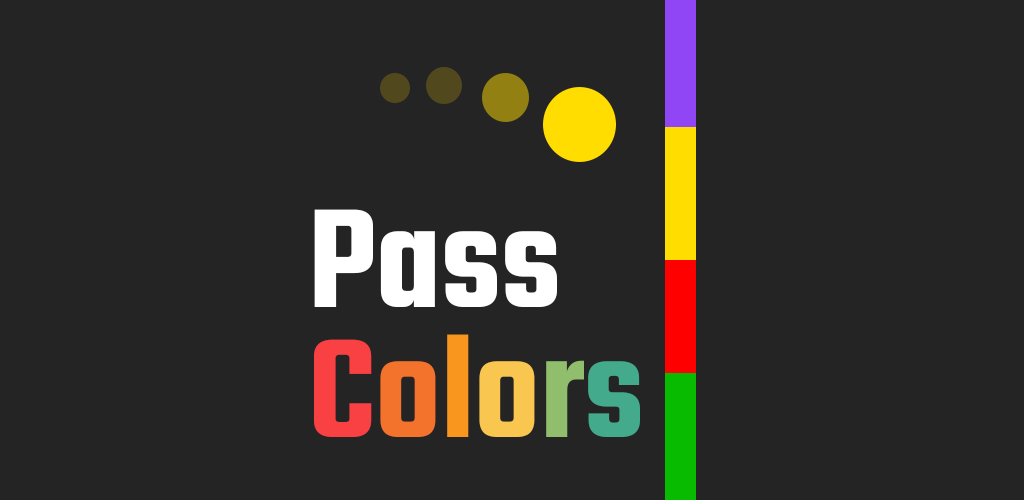
<style>
.page{position:relative;width:1024px;height:500px;background:#252424}
.page>*{position:absolute;margin:0}
.t1{font:153.3px/129.5px "Teko-SemiBold";color:#ffffff}
.t2{font:153.3px/129.5px "Teko-SemiBold";color:#f94144}
.t3{font:153.3px/129.5px "Teko-SemiBold";color:#f3722c}
.t4{font:153.3px/129.5px "Teko-SemiBold";color:#f8961e}
.t5{font:153.3px/129.5px "Teko-SemiBold";color:#f9c74f}
.t6{font:153.3px/129.5px "Teko-SemiBold";color:#90be6d}
.t7{font:153.3px/129.5px "Teko-SemiBold";color:#43aa8b}
</style>
<div class="page">
<p class="t1" style="left:314px;top:209px;width:326px;height:228px">Pass<br><span class="t2">C</span><span class="t3">o</span><span class="t4">l</span><span class="t5">o</span><span class="t6">r</span><span class="t7">s</span></p>
</div>
